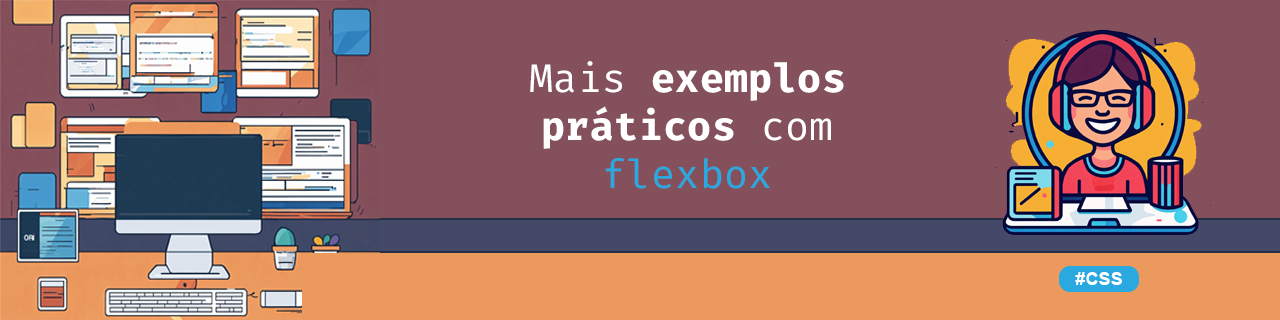
<style>
.page{position:relative;width:1280px;height:320px;background:#84505b}
.page>*{position:absolute;margin:0}
.t1{font:40px "FiraCode-Bold";letter-spacing:0.01em;color:#ffffff}
.t2{font:40px "FiraCode-Regular";letter-spacing:0.01em;color:#ffffff}
.t3{font:40px "FiraCode-Regular";letter-spacing:0.01em;color:#2aa9e0}
</style>
<div class="page">
<p class="t1" style="left:530px;top:61px;width:314px;height:128px;text-align:center"><span class="t2">Mais </span>exemplos práticos <span class="t2">com </span><span class="t3">flexbox</span></p>
</div>
